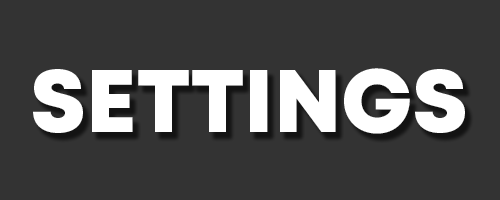
<style>
.page{position:relative;width:500px;height:200px;background:#333333}
.page>*{position:absolute;margin:0}
.t1{font:88.7px "Mont-HeavyDEMO";color:#ffffff}
</style>
<div class="page">
<p class="t1" style="left:33px;top:68px;width:432px;height:66px">SETTINGS</p>
</div>
